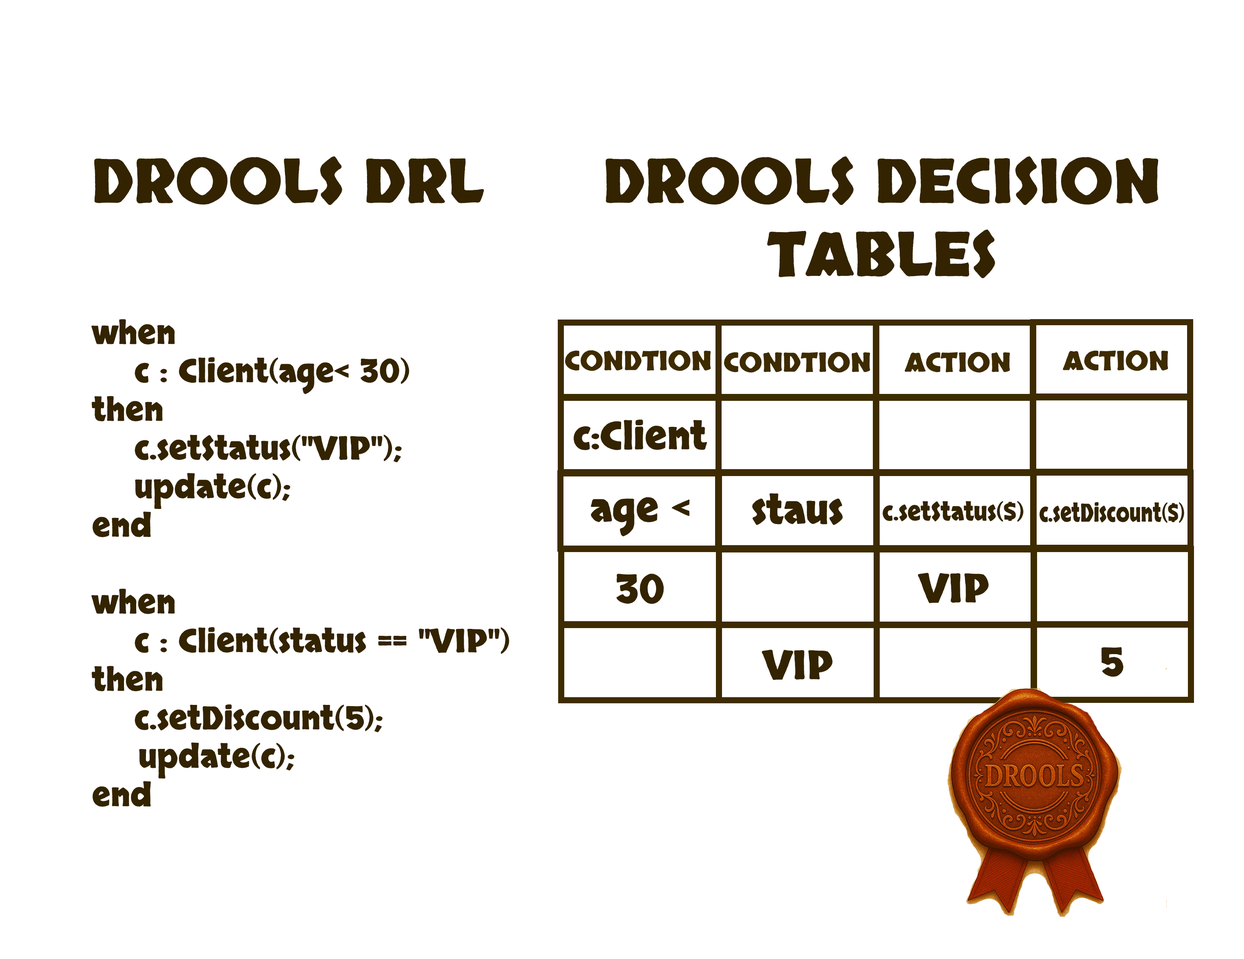
<style>
.page{position:relative;width:1244px;height:959px;background:#ffffff}
.page>*{position:absolute;margin:0}
.t1{font:61px "Skranji-Bold";color:#332300}
.t2{font:32.1px "Skranji-Bold";color:#332300}
.t3{font:26.4px "Skranji-Bold";color:#3e2b00}
.t4{font:38.2px "Skranji-Bold";color:#332300}
.t5{font:39.6px "Skranji-Bold";color:#332300}
.t6{font:25.1px "Skranji-Bold";color:#332300;scale:0.93 1}
.t7{font:25.1px "Skranji-Bold";color:#332300;scale:0.78 1}
</style>
<div class="page">
<p class="t1" style="left:94px;top:156px;width:390px;height:49px">DROOLS DRL</p>
<p class="t1" style="left:605px;top:156px;width:553px;height:122px;text-align:center">DROOLS DECISION<br>TABLES</p>
<p class="t2" style="left:91px;top:319px;width:418px;height:488px">when<br>    c : Client(age&lt; 30)<br>then<br>    c.setStatus("VIP");<br>    update(c);<br>end<br><br>when<br>    c : Client(status == "VIP")<br>then<br>    c.setDiscount(5);<br>    update(c);<br>end</p>
<p class="t3" style="left:565px;top:350px;width:145px;height:21px">CONDTION</p>
<p class="t3" style="left:724px;top:352px;width:146px;height:21px">CONDTION</p>
<p class="t3" style="left:904px;top:352px;width:106px;height:21px">ACTION</p>
<p class="t3" style="left:1062px;top:350px;width:106px;height:21px">ACTION</p>
<p class="t4" style="left:573px;top:419px;width:134px;height:31px">c:Client</p>
<p class="t5" style="left:591px;top:497px;width:98px;height:39px">age &lt;</p>
<p class="t5" style="left:752px;top:493px;width:91px;height:32px">staus</p>
<p class="t6" style="left:882px;top:501px;width:141px;height:21px">c.setStatus($)</p>
<p class="t7" style="left:1039px;top:502px;width:145px;height:21px">c.setDiscount($)</p>
<p class="t5" style="left:616px;top:573px;width:48px;height:31px">30</p>
<p class="t5" style="left:918px;top:573px;width:70px;height:30px">VIP</p>
<p class="t5" style="left:762px;top:649px;width:70px;height:31px">VIP</p>
<p class="t5" style="left:1101px;top:647px;width:22px;height:30px">5</p>
</div>
